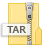
<style>
.page{position:relative;width:48px;height:48px;background:#ffffff}
.page>*{position:absolute;margin:0}
.t1{font:9px "MeiryoUI-Bold";color:#64635e}
</style>
<div class="page">
<p class="t1" style="left:7px;top:26px;width:19px;height:7px">TAR</p>
</div>
